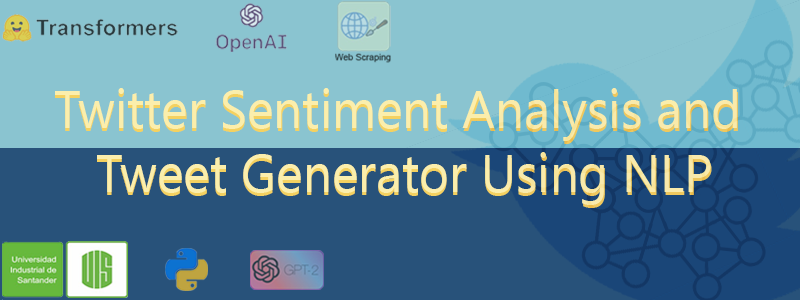
<style>
.page{position:relative;width:800px;height:300px;background:#8ac4d0}
.page>*{position:absolute;margin:0}
.t1{font:53.2px "SegoeUI";color:#fbeeac;scale:0.96 1}
.t2{font:53.2px "SegoeUI";scale:0.96 1}
</style>
<div class="page">
<p class="t1" style="left:55px;top:88px;width:682px;height:117px;text-align:center">Twitter Sentiment Analysis and <br>Tweet Generator Using NLP</p>
<p class="t2" style="left:55px;top:91px;width:683px;height:117px;text-align:center">Twitter Sentiment Analysis and <br>Tweet Generator Using NLP</p>
</div>
